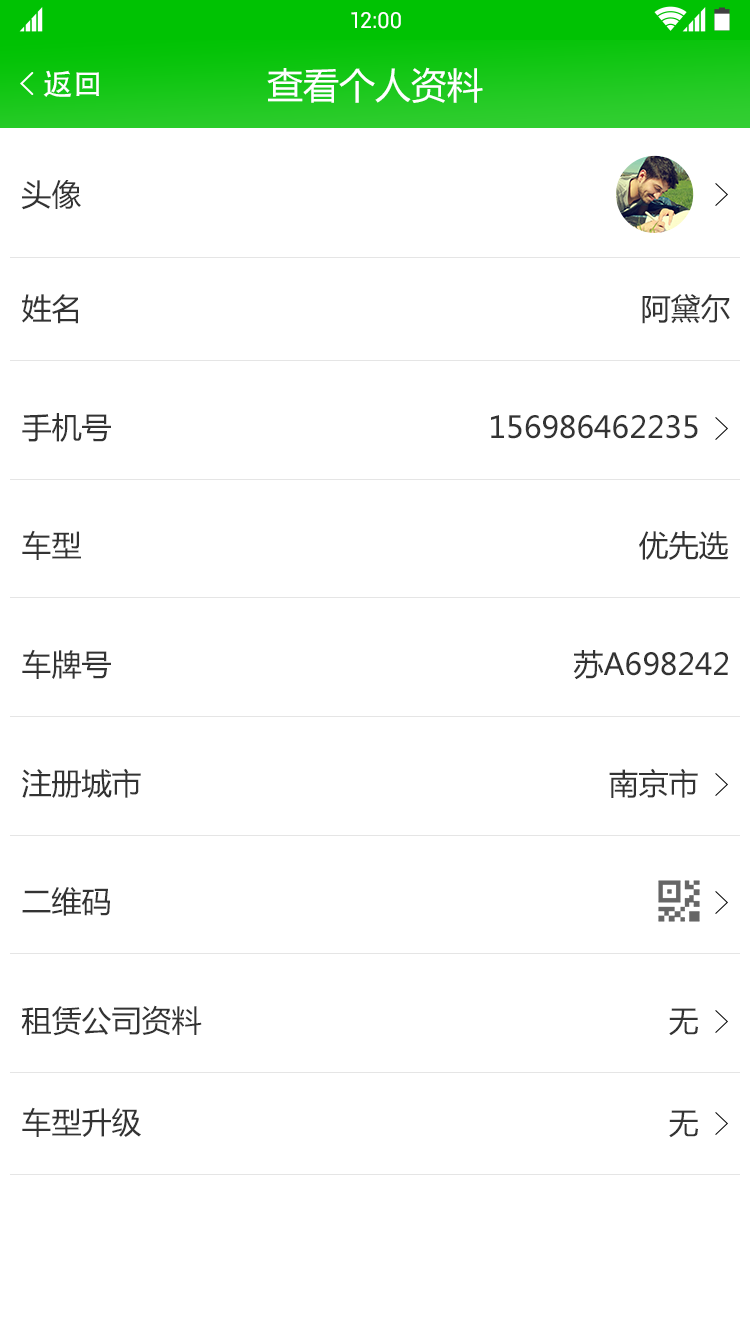
<style>
.page{position:relative;width:750px;height:1336px;background:#ffffff}
.page>*{position:absolute;margin:0}
.t1{font:22px "Roboto-Regular";color:#ffffff}
.t2{font:30px "AdobeHeitiStd-Regular";color:#ffffff}
.t3{font:36px "MicrosoftYaHei";color:#ffffff}
.t4{font:30px "MicrosoftYaHei";color:#333333}
</style>
<div class="page">
<p class="t1" style="left:351px;top:12px;width:50px;height:17px">12:00</p>
<p class="t2" style="left:43px;top:70px;width:56px;height:27px">返回</p>
<p class="t3" style="left:267px;top:67px;width:216px;height:36px">查看个人资料</p>
<p class="t4" style="left:21px;top:180px;width:60px;height:30px">头像</p>
<p class="t4" style="left:22px;top:294px;width:56px;height:30px">姓名</p>
<p class="t4" style="left:642px;top:294px;width:88px;height:30px">阿黛尔</p>
<p class="t4" style="left:22px;top:413px;width:89px;height:29px">手机号</p>
<p class="t4" style="left:491px;top:415px;width:207px;height:24px">156986462235</p>
<p class="t4" style="left:22px;top:530px;width:59px;height:30px">车型</p>
<p class="t4" style="left:639px;top:531px;width:90px;height:29px">优先选</p>
<p class="t4" style="left:22px;top:649px;width:89px;height:30px">车牌号</p>
<p class="t4" style="left:573px;top:650px;width:155px;height:30px">苏A698242</p>
<p class="t4" style="left:22px;top:768px;width:119px;height:30px">注册城市</p>
<p class="t4" style="left:609px;top:768px;width:89px;height:30px">南京市</p>
<p class="t4" style="left:22px;top:887px;width:88px;height:29px">二维码</p>
<p class="t4" style="left:21px;top:1005px;width:181px;height:31px">租赁公司资料</p>
<p class="t4" style="left:669px;top:1008px;width:29px;height:28px">无</p>
<p class="t4" style="left:22px;top:1107px;width:119px;height:30px">车型升级</p>
<p class="t4" style="left:669px;top:1110px;width:29px;height:28px">无</p>
</div>
